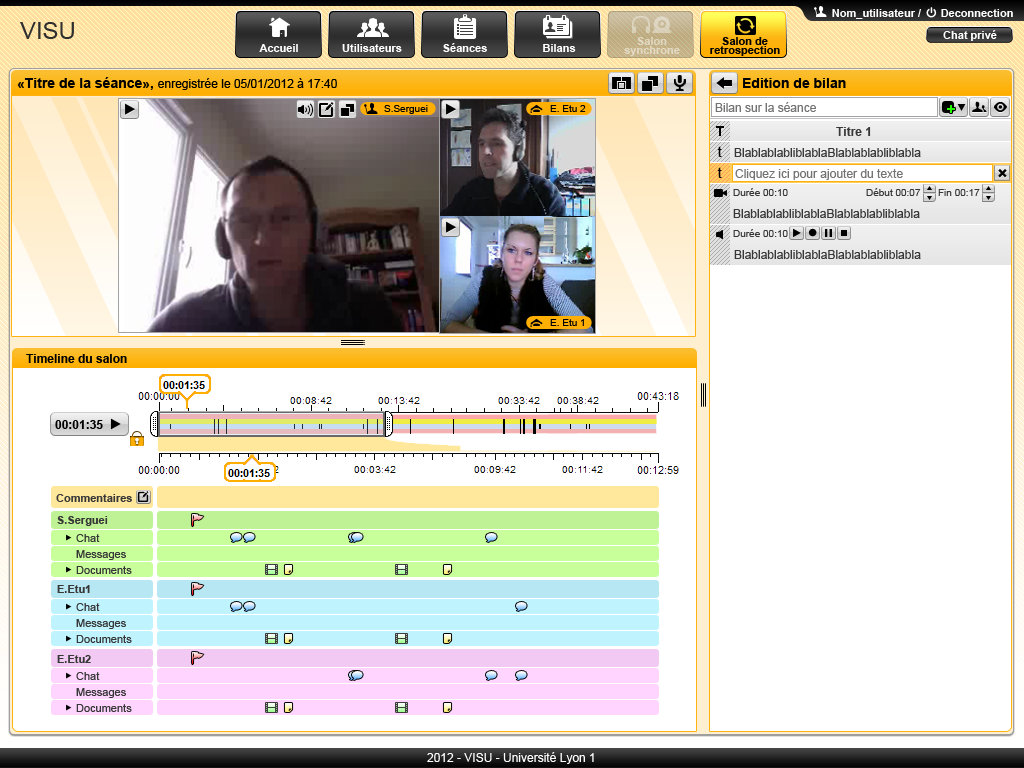
<style>
.page{position:relative;width:1024px;height:768px;background:#ffffff}
.page>*{position:absolute;margin:0}
.t1{font:11px "Arial-BoldMT";color:#ffffff}
.t2{font:24px "ArialMT";color:#2e2e2e}
.t3{font:11px/9px "Arial-BoldMT";color:#e3d8c2}
.t4{font:11px/9px "Arial-BoldMT";color:#000000}
.t5{font:12px "ArialMT";color:#000000}
.t6{font:14px "Arial-BoldMT";color:#000000}
.t7{font:12px "ArialMT";color:#737373}
.t8{font:10px "ArialMT";color:#000000}
.t9{font:14px "Arial-BoldMT";color:#24ff00}
.t10{font:12px "Arial-BoldMT";color:#373737}
.t11{font:14px "ArialMT";color:#000000}
.t12{font:12px "ArialMT";color:#373737}
.t13{font:19.3px "Arial-BoldMT";color:#000000}
.t14{font:10px "ArialMT";color:#373737}
.t15{font:12px "Arial-BoldMT";color:#000000}
.t16{font:11px "Arial-BoldMT";color:#373737}
.t17{font:11px "ArialMT";color:#373737}
.t18{font:12px "ArialMT";color:#fefefe}
</style>
<div class="page">
<p class="t1" style="left:832px;top:9px;width:89px;height:10px">Nom_utilisateur /</p>
<p class="t1" style="left:941px;top:9px;width:72px;height:8px">Deconnection</p>
<p class="t2" style="left:20px;top:22px;width:54px;height:17px">VISU</p>
<p class="t1" style="left:943px;top:30px;width:54px;height:11px">Chat privé</p>
<p class="t3" style="left:624px;top:37px;width:56px;height:19px;text-align:center">Salon<br>synchrone</p>
<p class="t4" style="left:710px;top:37px;width:70px;height:19px;text-align:center">Salon de<br>retrospection</p>
<p class="t1" style="left:259px;top:44px;width:39px;height:8px">Accueil</p>
<p class="t1" style="left:342px;top:44px;width:60px;height:8px">Utilisateurs</p>
<p class="t1" style="left:443px;top:43px;width:44px;height:9px">Séances</p>
<p class="t1" style="left:543px;top:44px;width:33px;height:8px">Bilans</p>
<p class="t5" style="left:17px;top:77px;width:320px;height:13px"><span class="t6">«Titre de la séance», </span>enregistrée le 05/01/2012 à 17:40</p>
<p class="t6" style="left:743px;top:78px;width:103px;height:10px">Edition de bilan</p>
<p class="t7" style="left:715px;top:102px;width:101px;height:10px">Bilan sur la séance</p>
<p class="t8" style="left:384px;top:105px;width:44px;height:9px">S.Serguei</p>
<p class="t8" style="left:550px;top:105px;width:36px;height:7px">E. Etu 2</p>
<p class="t9" style="left:947px;top:105px;width:8px;height:8px">+</p>
<p class="t6" style="left:716px;top:126px;width:8px;height:10px">T</p>
<p class="t10" style="left:836px;top:127px;width:35px;height:9px">Titre 1</p>
<p class="t11" style="left:717px;top:146px;width:5px;height:11px">t</p>
<p class="t12" style="left:734px;top:148px;width:187px;height:9px">BlablablabliblablaBlablablabliblabla</p>
<p class="t11" style="left:717px;top:167px;width:5px;height:11px">t</p>
<p class="t7" style="left:735px;top:169px;width:168px;height:11px">Cliquez ici pour ajouter du texte</p>
<p class="t13" style="left:998px;top:169px;width:9px;height:9px;rotate:-45deg">+</p>
<p class="t14" style="left:733px;top:188px;width:55px;height:8px">Durée 00:10</p>
<p class="t14" style="left:866px;top:188px;width:55px;height:8px">Début 00:07</p>
<p class="t14" style="left:938px;top:189px;width:42px;height:7px">Fin 00:17</p>
<p class="t12" style="left:733px;top:209px;width:187px;height:9px">BlablablabliblablaBlablablabliblabla</p>
<p class="t14" style="left:733px;top:229px;width:55px;height:8px">Durée 00:10</p>
<p class="t12" style="left:734px;top:250px;width:187px;height:9px">BlablablabliblablaBlablablabliblabla</p>
<p class="t8" style="left:550px;top:319px;width:34px;height:7px">E. Etu 1</p>
<p class="t15" style="left:26px;top:354px;width:101px;height:9px">Timeline du salon</p>
<p class="t15" style="left:55px;top:420px;width:48px;height:9px">00:01:35</p>
<p class="t16" style="left:56px;top:494px;width:76px;height:8px">Commentaires</p>
<p class="t16" style="left:57px;top:516px;width:51px;height:10px">S.Serguei</p>
<p class="t17" style="left:76px;top:534px;width:24px;height:8px">Chat</p>
<p class="t17" style="left:76px;top:550px;width:50px;height:10px">Messages</p>
<p class="t17" style="left:76px;top:566px;width:56px;height:8px">Documents</p>
<p class="t16" style="left:57px;top:585px;width:33px;height:8px">E.Etu1</p>
<p class="t17" style="left:76px;top:603px;width:24px;height:8px">Chat</p>
<p class="t17" style="left:76px;top:619px;width:50px;height:10px">Messages</p>
<p class="t17" style="left:76px;top:635px;width:56px;height:8px">Documents</p>
<p class="t16" style="left:57px;top:655px;width:34px;height:8px">E.Etu2</p>
<p class="t17" style="left:76px;top:672px;width:24px;height:8px">Chat</p>
<p class="t17" style="left:76px;top:688px;width:50px;height:10px">Messages</p>
<p class="t17" style="left:76px;top:704px;width:56px;height:8px">Documents</p>
<p class="t18" style="left:427px;top:752px;width:167px;height:12px">2012 - VISU - Université Lyon 1</p>
</div>
